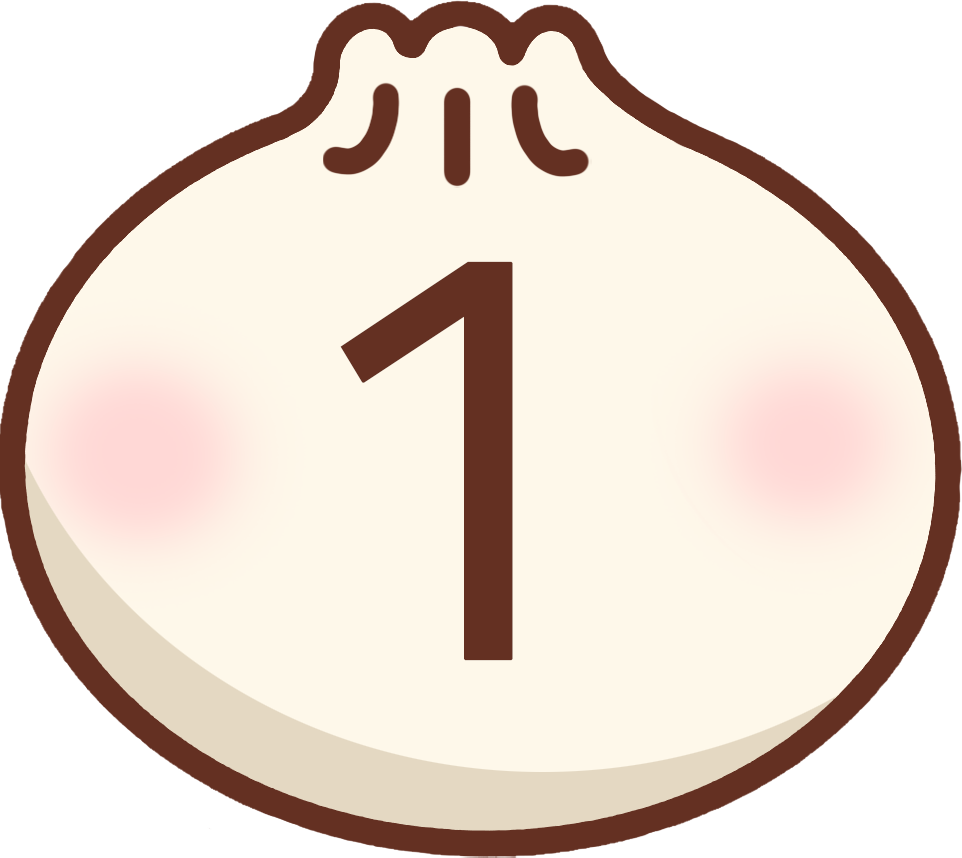
<style>
.page{position:relative;width:962px;height:858px;background:#fef8ea}
.page>*{position:absolute;margin:0}
.t1{font:600px "TitilliumWeb-Regular";letter-spacing:0.01em;color:#643022;font-weight:bold}
</style>
<div class="page">
<p class="t1" style="left:340px;top:261px;width:173px;height:400px">1</p>
</div>
